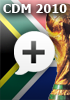
<style>
.page{position:relative;width:70px;height:100px}
.page>*{position:absolute;margin:0}
.t1{font:12px "Tahoma-Bold";letter-spacing:0.025em;color:#ffffff}
</style>
<div class="page">
<p class="t1" style="left:3px;top:4px;width:64px;height:9px">CDM 2010</p>
</div>
